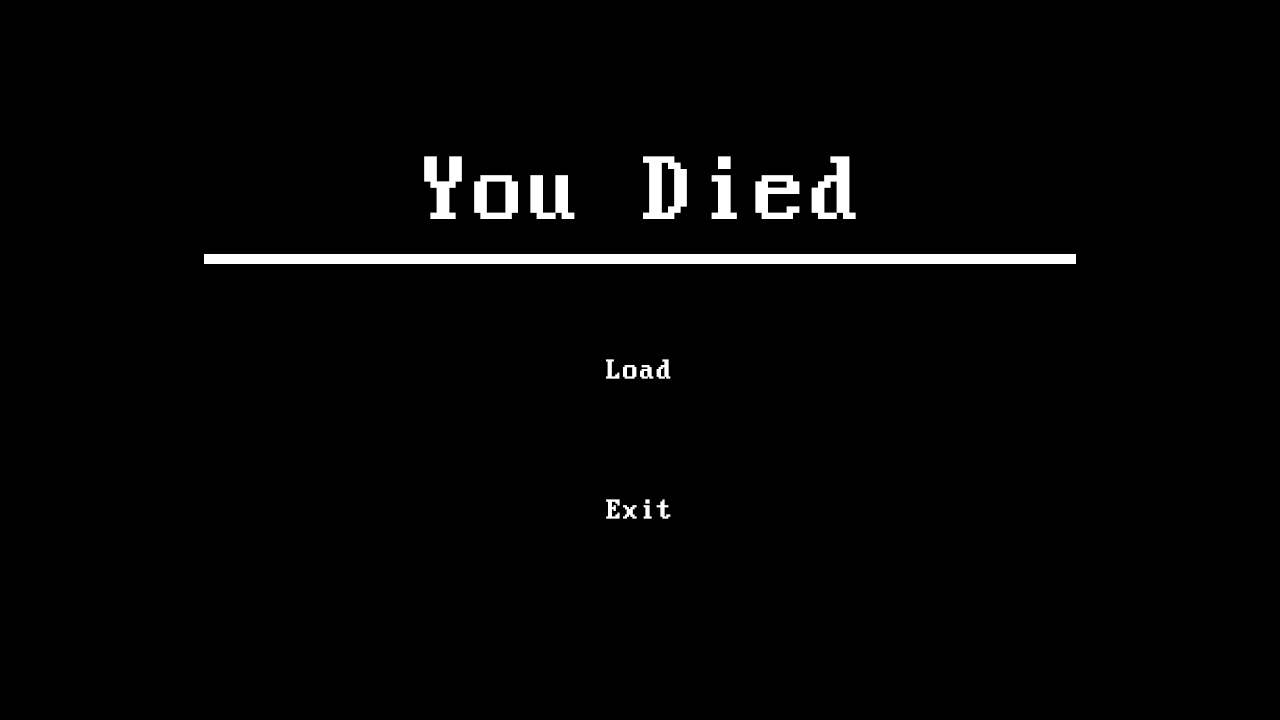
<style>
.page{position:relative;width:1280px;height:720px;background:#000000}
.page>*{position:absolute;margin:0}
.t1{font:100px "PerfectDOSVGA437";color:#ffffff}
.t2{font:30.2px "PerfectDOSVGA437";color:#ffffff}
.t3{font:30px "PerfectDOSVGA437";color:#ffffff}
</style>
<div class="page">
<p class="t1" style="left:424px;top:156px;width:432px;height:63px">You Died</p>
<p class="t2" style="left:606px;top:359px;width:65px;height:20px">Load</p>
<p class="t3" style="left:606px;top:499px;width:65px;height:20px">Exit</p>
</div>
